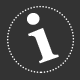
<style>
.page{position:relative;width:80px;height:80px;background:#333333}
.page>*{position:absolute;margin:0}
.t1{font:66.4px "Georgia-Bold";color:#ffffff}
</style>
<div class="page">
<p class="t1" style="left:27px;top:13px;width:32px;height:51px;rotate:-19deg">i</p>
</div>
